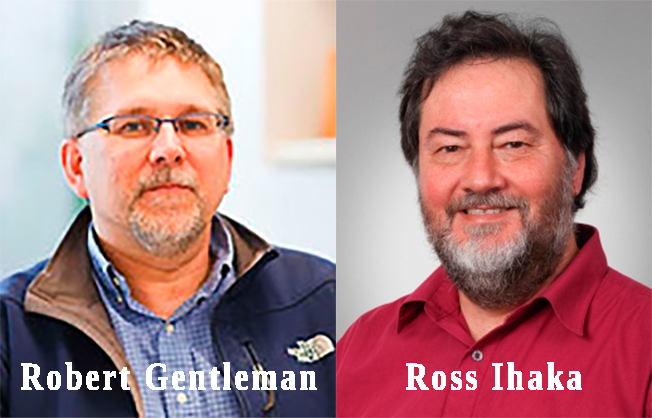
<style>
.page{position:relative;width:652px;height:418px}
.page>*{position:absolute;margin:0}
.t1{font:38.9px "LiberationSerif-Bold";letter-spacing:0.025em;color:#ffffff;font-weight:bold;scale:0.8 1}
</style>
<div class="page">
<p class="t1" style="left:21px;top:362px;width:296px;height:28px">Robert Gentleman</p>
<p class="t1" style="left:406px;top:362px;width:176px;height:28px">Ross Ihaka</p>
</div>
